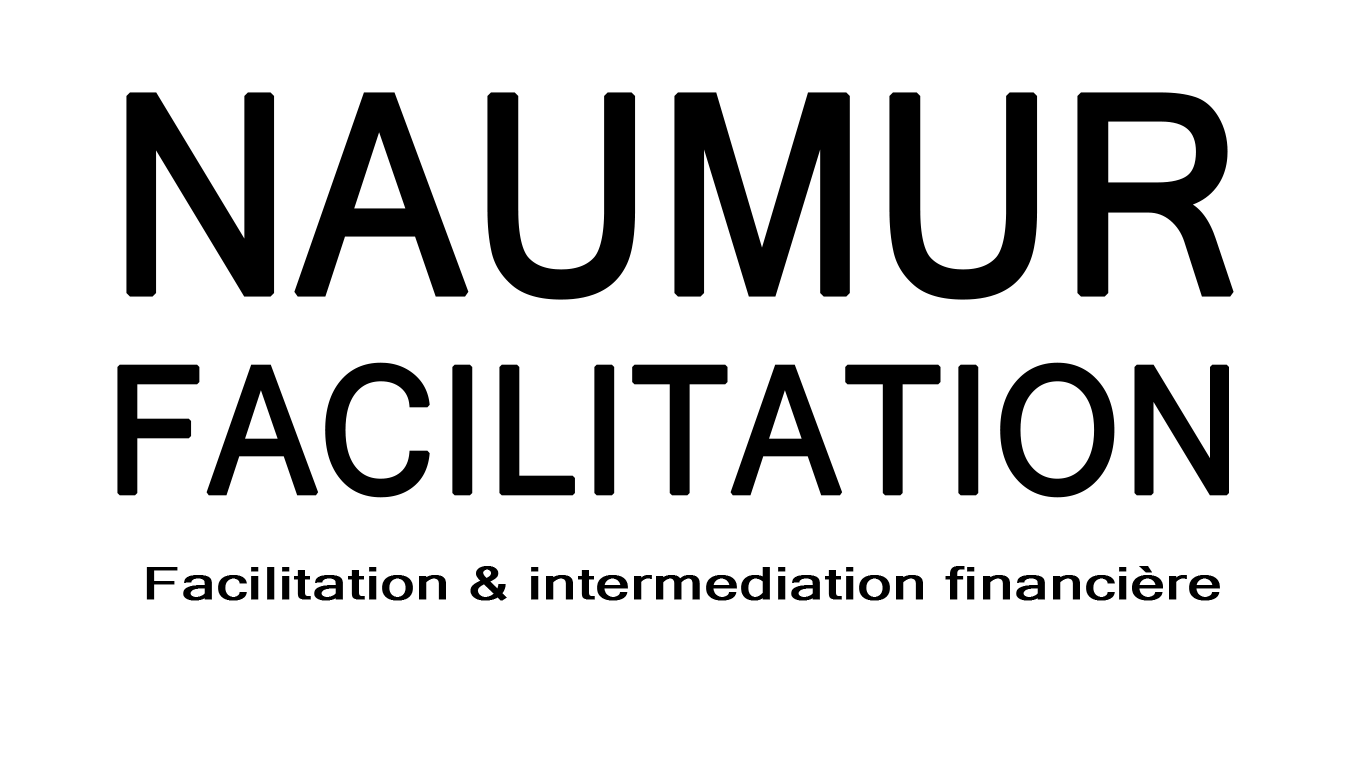
<style>
.page{position:relative;width:1366px;height:768px;background:#ffffff}
.page>*{position:absolute;margin:0}
.t1{font:275px "MicrosoftSansSerif";color:#000000;text-transform:uppercase;font-weight:bold;scale:0.91 1}
.t2{font:176px "MicrosoftSansSerif";color:#000000;text-transform:uppercase;font-weight:bold;scale:0.91 1}
.t3{font:45px "MicrosoftSansSerif";color:#000000;font-weight:bold;scale:1.33 1}
</style>
<div class="page">
<p class="t1" style="left:126px;top:92px;width:1108px;height:208px">NAUMUR</p>
<p class="t2" style="left:117px;top:362px;width:1112px;height:136px">FACILITATION</p>
<p class="t3" style="left:146px;top:566px;width:1074px;height:35px">Facilitation &amp; intermediation financière</p>
</div>
